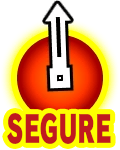
<style>
.page{position:relative;width:120px;height:150px;background:#ffffff}
.page>*{position:absolute;margin:0}
.t1{font:37.3px "RodinNTLGPro-UB";color:#c0191f;scale:0.62 1}
</style>
<div class="page">
<p class="t1" style="left:7px;top:113px;width:104px;height:31px">SEGURE</p>
</div>
